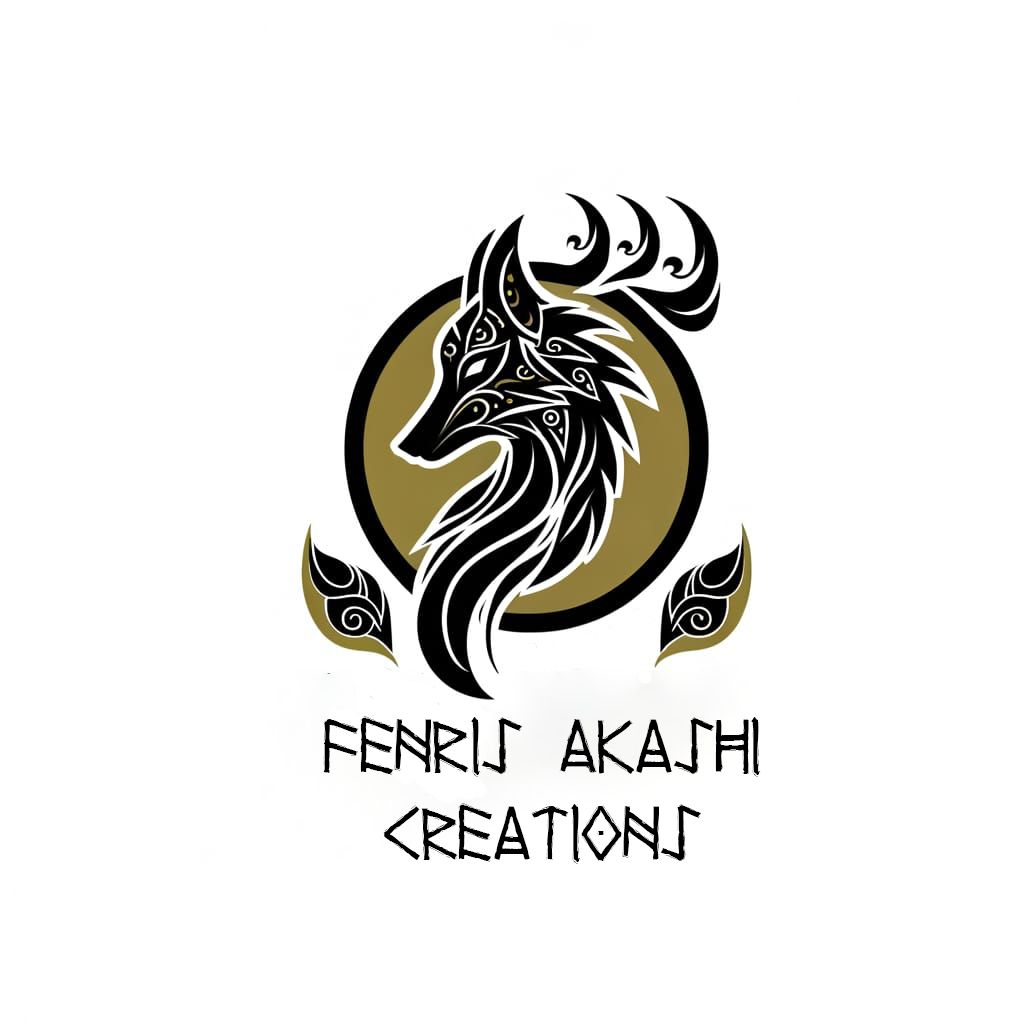
<style>
.page{position:relative;width:1024px;height:1024px;background:#ffffff}
.page>*{position:absolute;margin:0}
.t1{font:72px "Yggdrasil";color:#000000}
</style>
<div class="page">
<p class="t1" style="left:323px;top:716px;width:438px;height:148px;text-align:center">Fenris Akashi<br>Creations</p>
</div>
